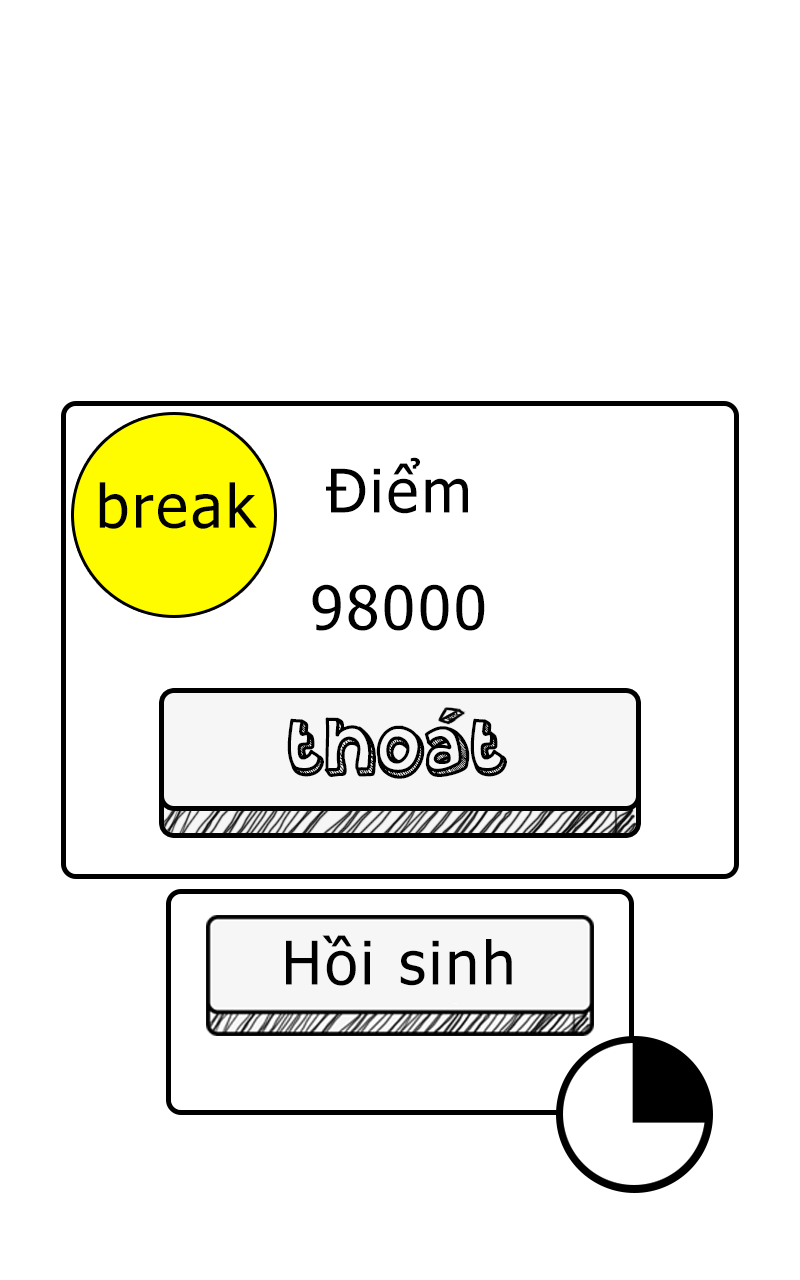
<style>
.page{position:relative;width:800px;height:1280px;background:#ffffff}
.page>*{position:absolute;margin:0}
.t1{font:60px "Tahoma";letter-spacing:0.05em;color:#000000}
</style>
<div class="page">
<p class="t1" style="left:326px;top:457px;width:142px;height:57px">Điểm</p>
<p class="t1" style="left:99px;top:482px;width:158px;height:47px">break</p>
<p class="t1" style="left:312px;top:584px;width:173px;height:47px">98000</p>
<p class="t1" style="left:286px;top:935px;width:226px;height:51px">Hồi sinh</p>
</div>
